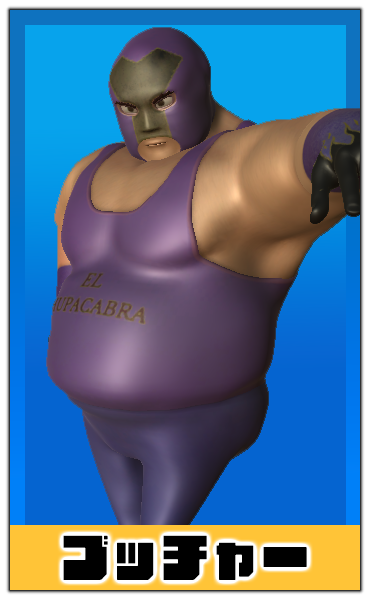
<style>
.page{position:relative;width:370px;height:600px}
.page>*{position:absolute;margin:0}
.t1{font:50px "AB-countryroad";color:#000000}
</style>
<div class="page">
<p class="t1" style="left:63px;top:535px;width:244px;height:45px">ブッチャー</p>
</div>
